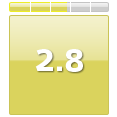
<style>
.page{position:relative;width:117px;height:117px;background:#dad35d}
.page>*{position:absolute;margin:0}
.t1{font:36px "Colaborate-Bold";color:#ffffff;text-transform:uppercase}
</style>
<div class="page">
<p class="t1" style="left:35px;top:49px;width:48px;height:23px">2.8</p>
</div>
